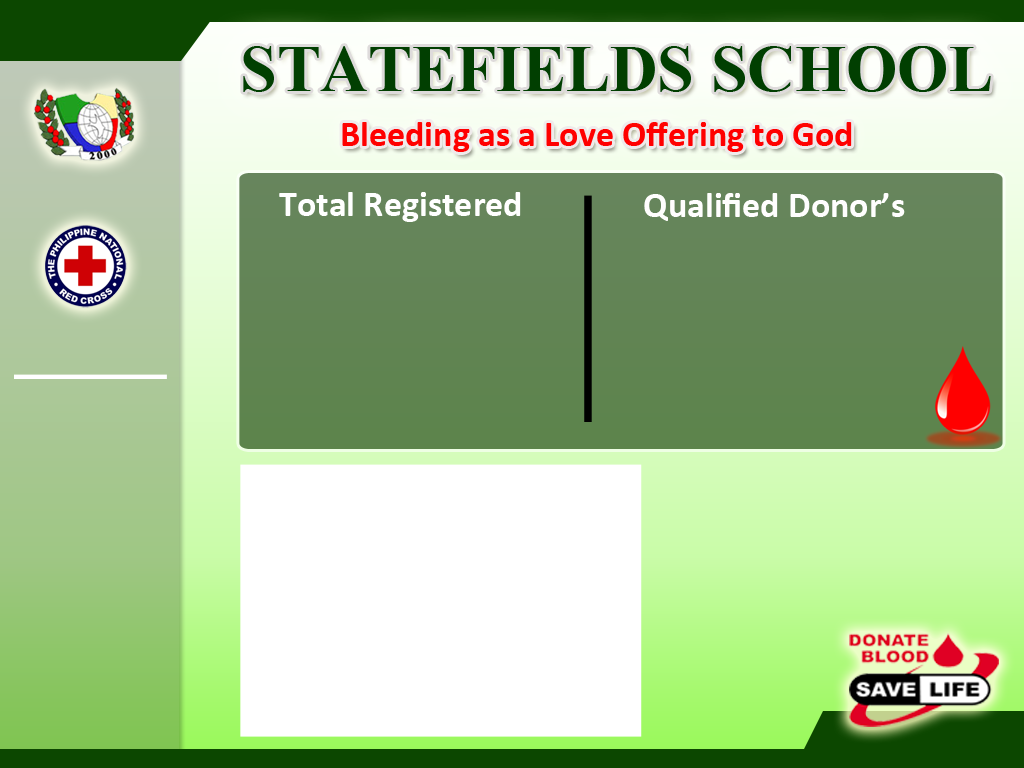
<style>
.page{position:relative;width:1024px;height:768px}
.page>*{position:absolute;margin:0}
.t1{font:65.9px "TimesNewRomanPS-BoldMT";color:#013f01}
.t2{font:36px "Calibri-Bold";color:#ff0000}
.t3{font:36px "Calibri-Bold";color:#ffffff}
.t4{font:36px "Calibri-Bold";color:#fffefe}
</style>
<div class="page">
<p class="t1" style="left:243px;top:46px;width:748px;height:46px">STATEFIELDS SCHOOL</p>
<p class="t2" style="left:342px;top:122px;width:510px;height:30px">Bleeding as a Love Offering to God</p>
<p class="t3" style="left:279px;top:192px;width:242px;height:30px">Total Registered</p>
<p class="t4" style="left:644px;top:193px;width:261px;height:28px">Qualified Donor’s</p>
</div>
